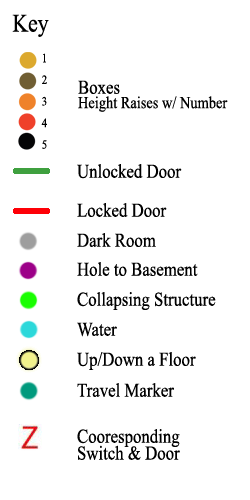
<style>
.page{position:relative;width:250px;height:500px;background:#ffffff}
.page>*{position:absolute;margin:0}
.t1{font:25.2px "TimesNewRomanPSMT";color:#000000;scale:0.86 1}
.t2{font:12.6px "TimesNewRomanPSMT";color:#000000;scale:0.86 1}
.t3{font:16.8px "TimesNewRomanPSMT";color:#000000;scale:0.86 1}
.t4{font:19.6px "TimesNewRomanPSMT";color:#000000;scale:0.86 1}
</style>
<div class="page">
<p class="t1" style="left:12px;top:14px;width:37px;height:23px">Key</p>
<p class="t2" style="left:41px;top:53px;width:6px;height:96px;text-align:center">1<br><br>2<br><br>3<br><br>4<br><br>5</p>
<p class="t3" style="left:78px;top:80px;width:150px;height:32px"><span class="t4">Boxes<br></span>Height Raises w/ Number</p>
<p class="t4" style="left:77px;top:164px;width:105px;height:15px">Unlocked Door</p>
<p class="t4" style="left:77px;top:203px;width:90px;height:14px">Locked Door</p>
<p class="t4" style="left:77px;top:233px;width:79px;height:14px">Dark Room</p>
<p class="t4" style="left:77px;top:262px;width:121px;height:14px">Hole to Basement</p>
<p class="t4" style="left:77px;top:292px;width:139px;height:18px">Collapsing Structure</p>
<p class="t4" style="left:77px;top:322px;width:40px;height:15px">Water</p>
<p class="t4" style="left:77px;top:352px;width:119px;height:18px">Up/Down a Floor</p>
<p class="t4" style="left:77px;top:383px;width:97px;height:14px">Travel Marker</p>
<p class="t4" style="left:77px;top:429px;width:103px;height:31px">Cooresponding Switch &amp; Door</p>
</div>
